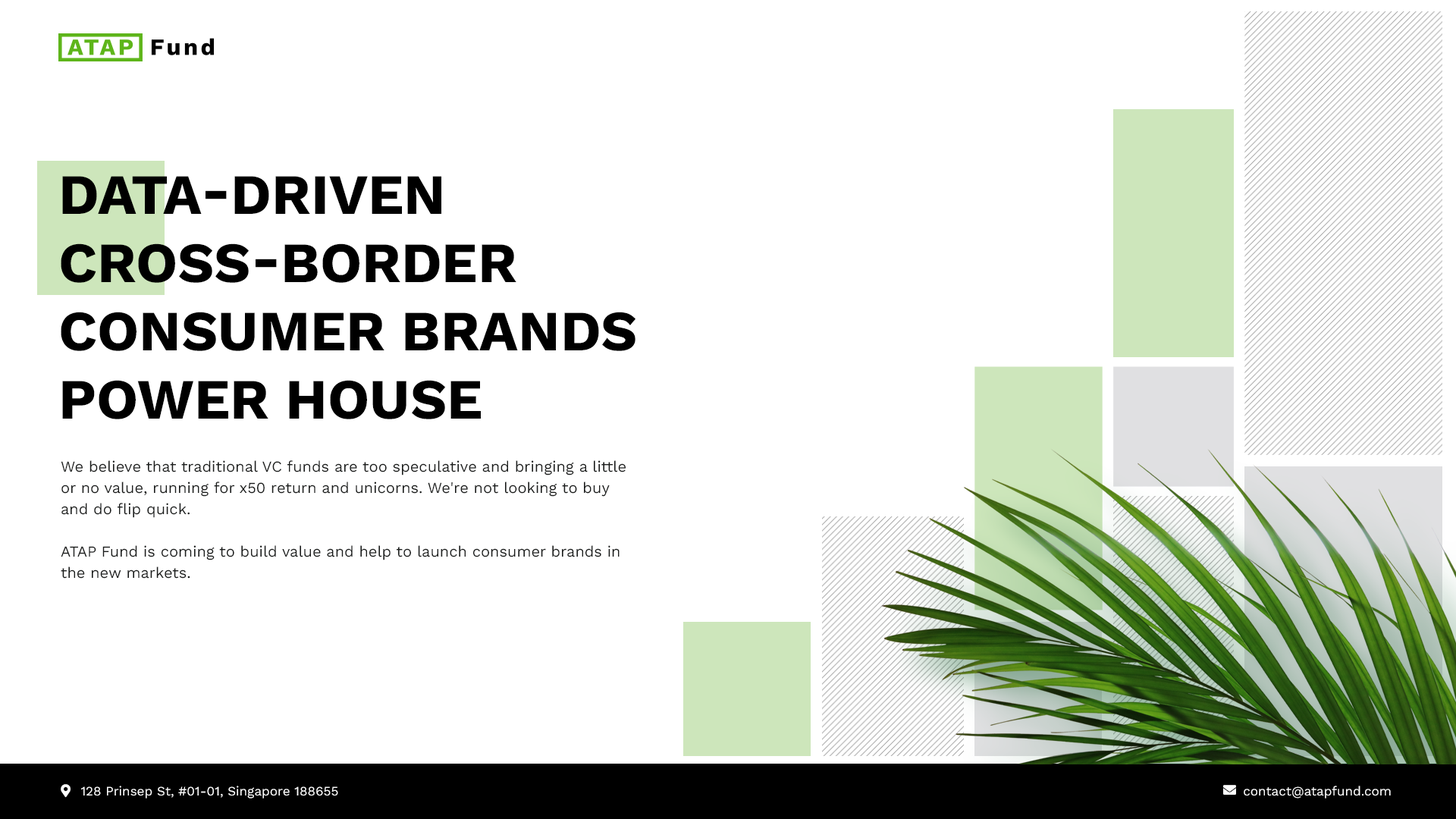
<style>
.page{position:relative;width:1456px;height:819px;background:#ffffff}
.page>*{position:absolute;margin:0}
.t1{font:56.9px "WorkSans-Bold";color:#000000;text-transform:uppercase}
.t2{font:15.2px/21.2px "WorkSans-Regular";color:#1a1c1b}
.t3{font:12.9px "WorkSans-Regular";color:#ffffff}
</style>
<div class="page">
<p class="t1" style="left:61px;top:176px;width:575px;height:243px">Data-driven Cross-border Consumer Brands Power House</p>
<p class="t2" style="left:61px;top:460px;width:565px;height:119px">We believe that traditional VC funds are too speculative and bringing a little or no value, running for x50 return and unicorns. We're not looking to buy and do flip quick. <br><br>ATAP Fund is coming to build value and help to launch consumer brands in the new markets.</p>
<p class="t3" style="left:81px;top:786px;width:257px;height:13px">128 Prinsep St, #01-01, Singapore 188655</p>
<p class="t3" style="left:1244px;top:786px;width:147px;height:13px">contact@atapfund.com</p>
</div>
